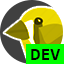
<style>
.page{position:relative;width:64px;height:64px;background:#ffffff}
.page>*{position:absolute;margin:0}
.t1{font:18px "Consolas-Bold";color:#000000}
</style>
<div class="page">
<p class="t1" style="left:31px;top:49px;width:29px;height:11px">DEV</p>
</div>
